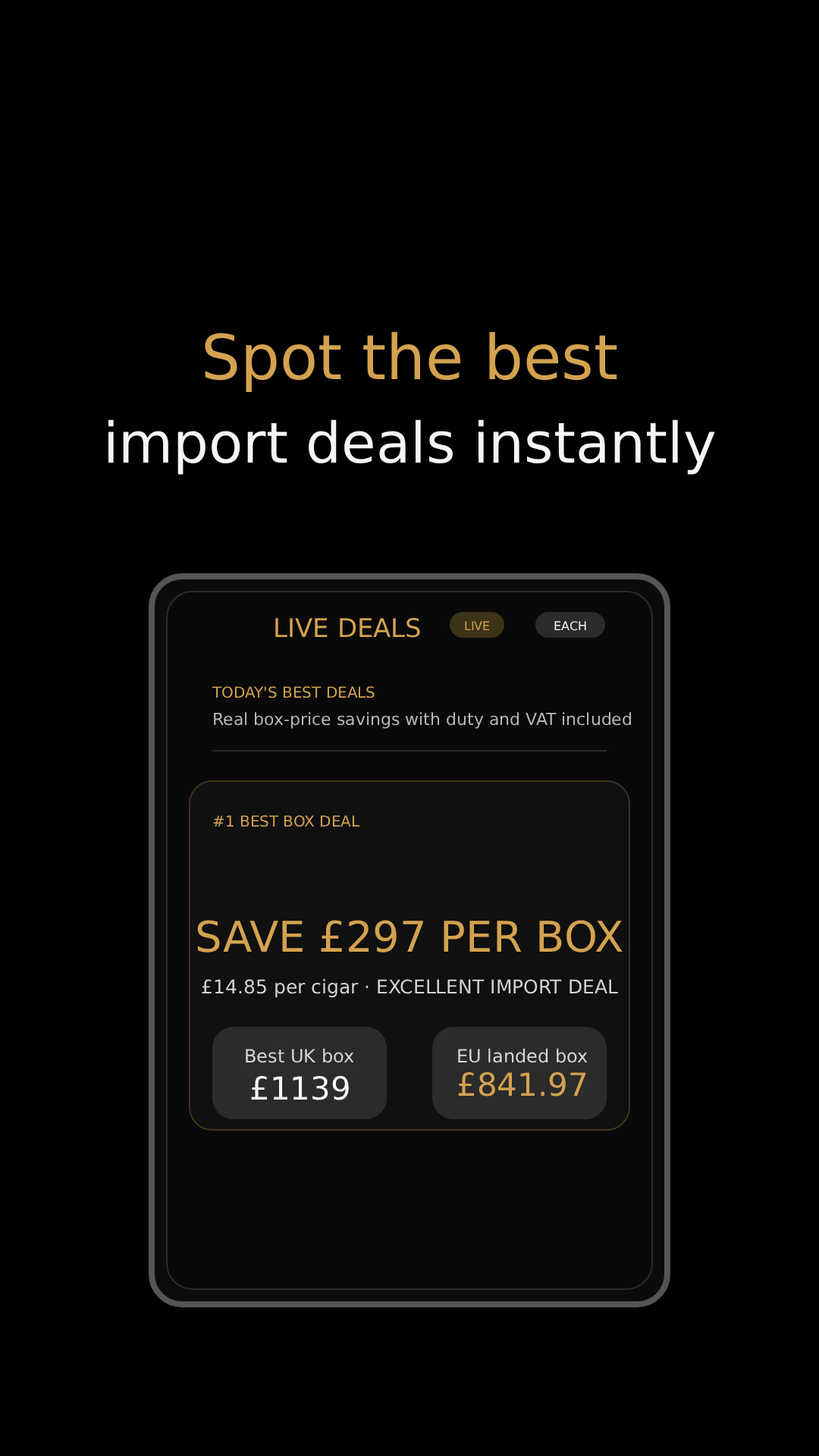
<style>
.page{position:relative;width:819px;height:1456px;background:#000000}
.page>*{position:absolute;margin:0}
.t1{font:62.2px "Arial";color:#d4a24f}
.t2{font:56.1px "Arial";color:#f6f6f6}
.t3{font:25.8px "Arial";color:#d4a24f}
.t4{font:12.1px "Arial";color:#d4a24f}
.t5{font:12.1px "Arial";color:#f6f6f6}
.t6{font:15.2px "Arial";color:#d4a24f}
.t7{font:16.7px "Arial";color:#b8b8b8}
.t8{font:42.5px "Arial";color:#d4a24f}
.t9{font:19px "Arial";color:#d4d4d4}
.t10{font:18.2px "Arial";color:#d8d8d8}
.t11{font:31.8px "Arial";color:#d4a24f}
.t12{font:31.8px "Arial";color:#f6f6f6}
</style>
<div class="page">
<p class="t1" style="left:205px;top:331px;width:412px;height:62px">Spot the best</p>
<p class="t2" style="left:108px;top:419px;width:607px;height:56px">import deals instantly</p>
<p class="t3" style="left:275px;top:617px;width:145px;height:21px">LIVE DEALS</p>
<p class="t4" style="left:465px;top:621px;width:25px;height:9px">LIVE</p>
<p class="t5" style="left:554px;top:621px;width:32px;height:10px">EACH</p>
<p class="t6" style="left:212px;top:686px;width:163px;height:12px">TODAY'S BEST DEALS</p>
<p class="t7" style="left:214px;top:712px;width:417px;height:17px">Real box-price savings with duty and VAT included</p>
<p class="t6" style="left:213px;top:815px;width:147px;height:12px">#1 BEST BOX DEAL</p>
<p class="t8" style="left:197px;top:920px;width:426px;height:32px">SAVE £297 PER BOX</p>
<p class="t9" style="left:202px;top:979px;width:416px;height:19px">£14.85 per cigar · EXCELLENT IMPORT DEAL</p>
<p class="t10" style="left:246px;top:1048px;width:108px;height:15px">Best UK box</p>
<p class="t10" style="left:458px;top:1048px;width:130px;height:15px">EU landed box</p>
<p class="t11" style="left:458px;top:1072px;width:128px;height:25px">£841.97</p>
<p class="t12" style="left:251px;top:1075px;width:98px;height:25px">£1139</p>
</div>
